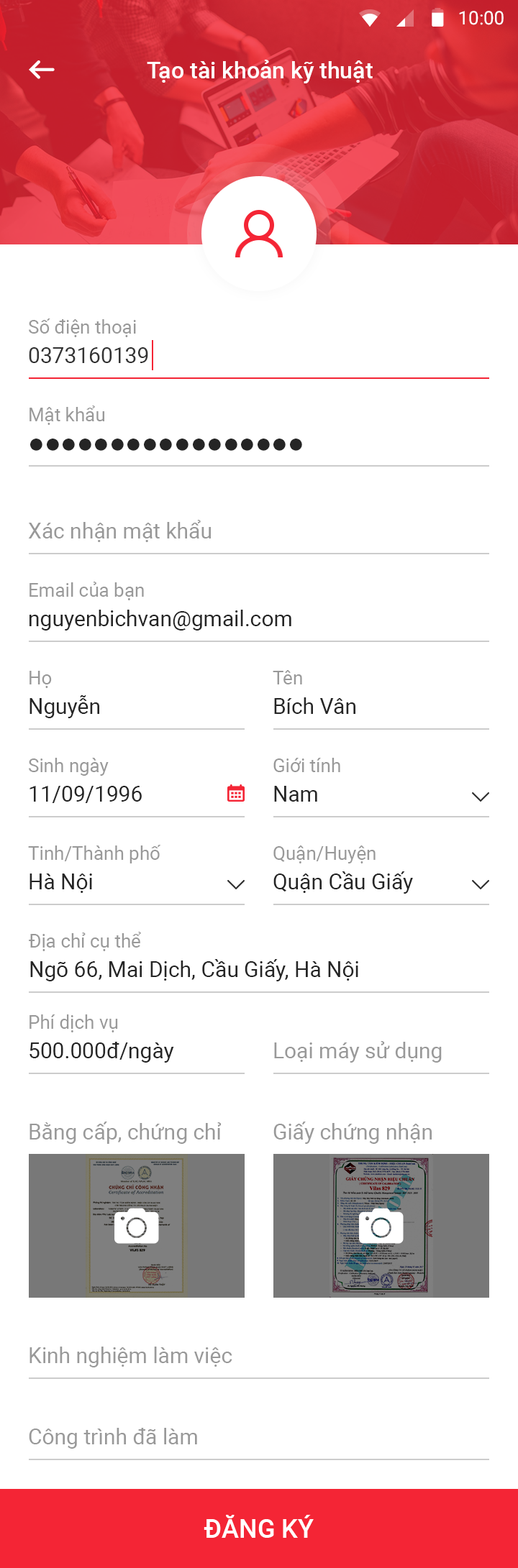
<style>
.page{position:relative;width:518px;height:1568px;background:#ffffff}
.page>*{position:absolute;margin:0}
.t1{font:18.7px "Roboto-Regular";color:#ffffff}
.t2{font:23px "Roboto-Medium";color:#ffffff}
.t3{font:18.7px "Roboto-Regular";color:#999999}
.t4{font:21.6px "Roboto-Regular";color:#333333}
.t5{font:57.5px "MyriadPro-Regular";color:#252525}
.t6{font:21.6px "Roboto-Regular";color:#999999}
.t7{font:21.6px "Roboto-Regular";color:#252525}
.t8{font:25.9px "Roboto-Medium";color:#ffffff;text-transform:uppercase}
</style>
<div class="page">
<p class="t1" style="left:459px;top:11px;width:44px;height:14px">10:00</p>
<p class="t2" style="left:147px;top:60px;width:225px;height:23px">Tạo tài khoản kỹ thuật</p>
<p class="t3" style="left:29px;top:318px;width:107px;height:19px">Số điện thoại</p>
<p class="t4" style="left:29px;top:347px;width:119px;height:16px">0373160139</p>
<p class="t3" style="left:29px;top:405px;width:75px;height:20px">Mật khẩu</p>
<p class="t5" style="left:30px;top:439px;width:272px;height:12px">•••••••••••••••••</p>
<p class="t6" style="left:28px;top:520px;width:183px;height:22px">Xác nhận mật khẩu</p>
<p class="t3" style="left:29px;top:582px;width:115px;height:18px">Email của bạn</p>
<p class="t7" style="left:29px;top:610px;width:262px;height:21px">nguyenbichvan@gmail.com</p>
<p class="t3" style="left:29px;top:671px;width:23px;height:17px">Họ</p>
<p class="t3" style="left:272px;top:670px;width:30px;height:14px">Tên</p>
<p class="t7" style="left:29px;top:695px;width:70px;height:23px">Nguyễn</p>
<p class="t7" style="left:274px;top:697px;width:81px;height:17px">Bích Vân</p>
<p class="t3" style="left:29px;top:758px;width:80px;height:18px">Sinh ngày</p>
<p class="t3" style="left:273px;top:758px;width:67px;height:14px">Giới tính</p>
<p class="t7" style="left:29px;top:786px;width:113px;height:17px">11/09/1996</p>
<p class="t7" style="left:274px;top:786px;width:43px;height:16px">Nam</p>
<p class="t3" style="left:28px;top:845px;width:133px;height:18px">Tinh/Thành phố</p>
<p class="t3" style="left:273px;top:845px;width:102px;height:18px">Quận/Huyện</p>
<p class="t7" style="left:29px;top:874px;width:63px;height:19px">Hà Nội</p>
<p class="t7" style="left:273px;top:871px;width:140px;height:23px">Quận Cầu Giấy</p>
<p class="t3" style="left:29px;top:932px;width:112px;height:19px">Địa chỉ cụ thể</p>
<p class="t7" style="left:30px;top:959px;width:328px;height:22px">Ngõ 66, Mai Dịch, Cầu Giấy, Hà Nội</p>
<p class="t3" style="left:29px;top:1014px;width:89px;height:18px">Phí dịch vụ</p>
<p class="t7" style="left:29px;top:1042px;width:145px;height:21px">500.000đ/ngày</p>
<p class="t6" style="left:274px;top:1041px;width:167px;height:22px">Loại máy sử dụng</p>
<p class="t6" style="left:29px;top:1122px;width:192px;height:22px">Bằng cấp, chứng chỉ</p>
<p class="t6" style="left:273px;top:1122px;width:158px;height:22px">Giấy chứng nhận</p>
<p class="t6" style="left:29px;top:1347px;width:203px;height:20px">Kinh nghiệm làm việc</p>
<p class="t6" style="left:29px;top:1428px;width:168px;height:21px">Công trình đã làm</p>
<p class="t8" style="left:203px;top:1515px;width:110px;height:23px">đăng ký</p>
</div>
